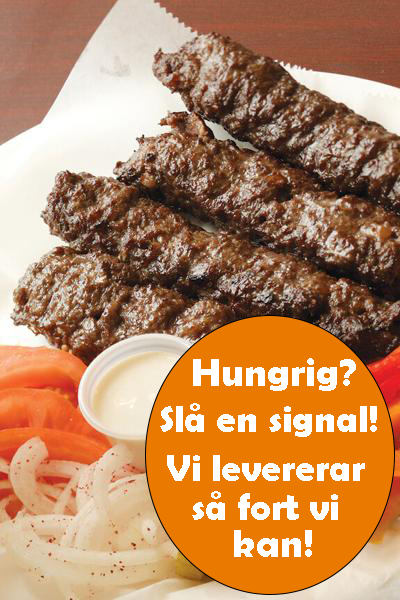
<style>
.page{position:relative;width:400px;height:600px}
.page>*{position:absolute;margin:0}
.t1{font:40px "BerlinSansFBDemi-Bold";color:#ffffff}
.t2{font:38px "BerlinSansFBDemi-Bold";color:#ffffff}
</style>
<div class="page">
<p class="t1" style="left:193px;top:358px;width:163px;height:33px">Hungrig?</p>
<p class="t2" style="left:160px;top:403px;width:217px;height:34px">Slå en signal!</p>
<p class="t2" style="left:167px;top:455px;width:198px;height:26px">Vi levererar</p>
<p class="t2" style="left:192px;top:491px;width:146px;height:29px">så fort vi</p>
<p class="t1" style="left:234px;top:530px;width:78px;height:27px">kan!</p>
</div>
